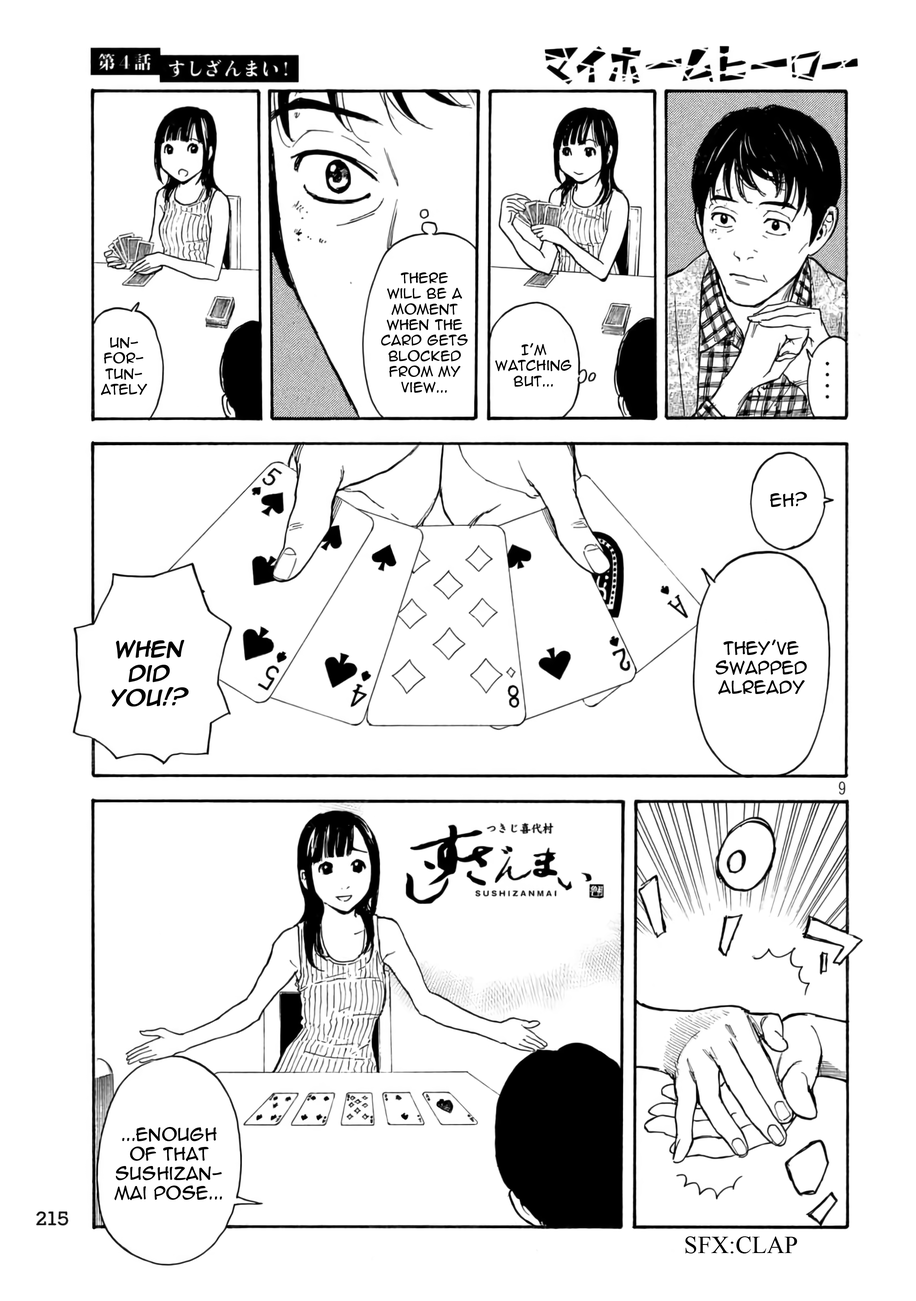
<style>
.page{position:relative;width:916px;height:1301px;background:#ffffff}
.page>*{position:absolute;margin:0}
.t1{font:13px "AnimeAce2.0BB";color:#000000}
.t2{font:16.3px "AnimeAce2.0BB";color:#000000}
.t3{font:20.3px "AnimeAce2.0BB";color:#000000;font-weight:bold;font-style:italic}
.t4{font:24.4px "TimesNewRomanPSMT";color:#000000;text-transform:uppercase}
</style>
<div class="page">
<p class="t1" style="left:381px;top:272px;width:87px;height:121px;text-align:center">There <br>will be a moment when the card gets blocked from my view...</p>
<p class="t1" style="left:101px;top:337px;width:46px;height:58px;text-align:center">Un-<br>for-<br>tun-<br>ately</p>
<p class="t1" style="left:495px;top:343px;width:77px;height:44px;text-align:center">I’m watching but...</p>
<p class="t2" style="left:771px;top:492px;width:37px;height:15px">Eh?</p>
<p class="t3" style="left:111px;top:640px;width:78px;height:67px;text-align:center">When <br>did you!?</p>
<p class="t2" style="left:716px;top:640px;width:92px;height:54px;text-align:center">They’ve swapped already</p>
<p class="t2" style="left:114px;top:1127px;width:108px;height:73px;text-align:center">...Enough of that Sushizan-<br>mai pose...</p>
<p class="t4" style="left:686px;top:1236px;width:112px;height:18px">sfx:clap</p>
</div>
